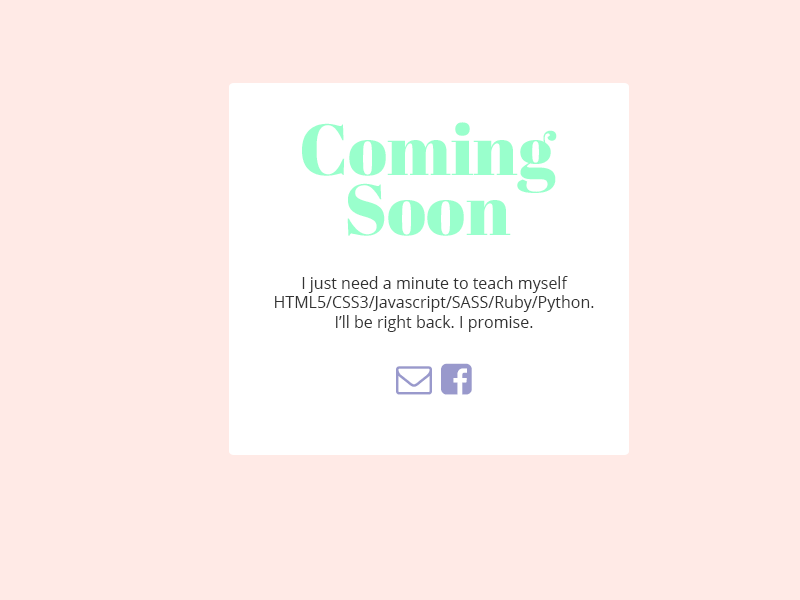
<style>
.page{position:relative;width:800px;height:600px;background:#ffeae6}
.page>*{position:absolute;margin:0}
.t1{font:72px/60px "AbrilFatface-Regular";color:#99ffcc}
.t2{font:16px "OpenSans";color:#333333}
</style>
<div class="page">
<p class="t1" style="left:302px;top:122px;width:255px;height:114px;text-align:center">Coming<br>Soon</p>
<p class="t2" style="left:275px;top:276px;width:319px;height:56px;text-align:center">I just need a minute to teach myself HTML5/CSS3/Javascript/SASS/Ruby/Python.<br>I’ll be right back. I promise.</p>
</div>
